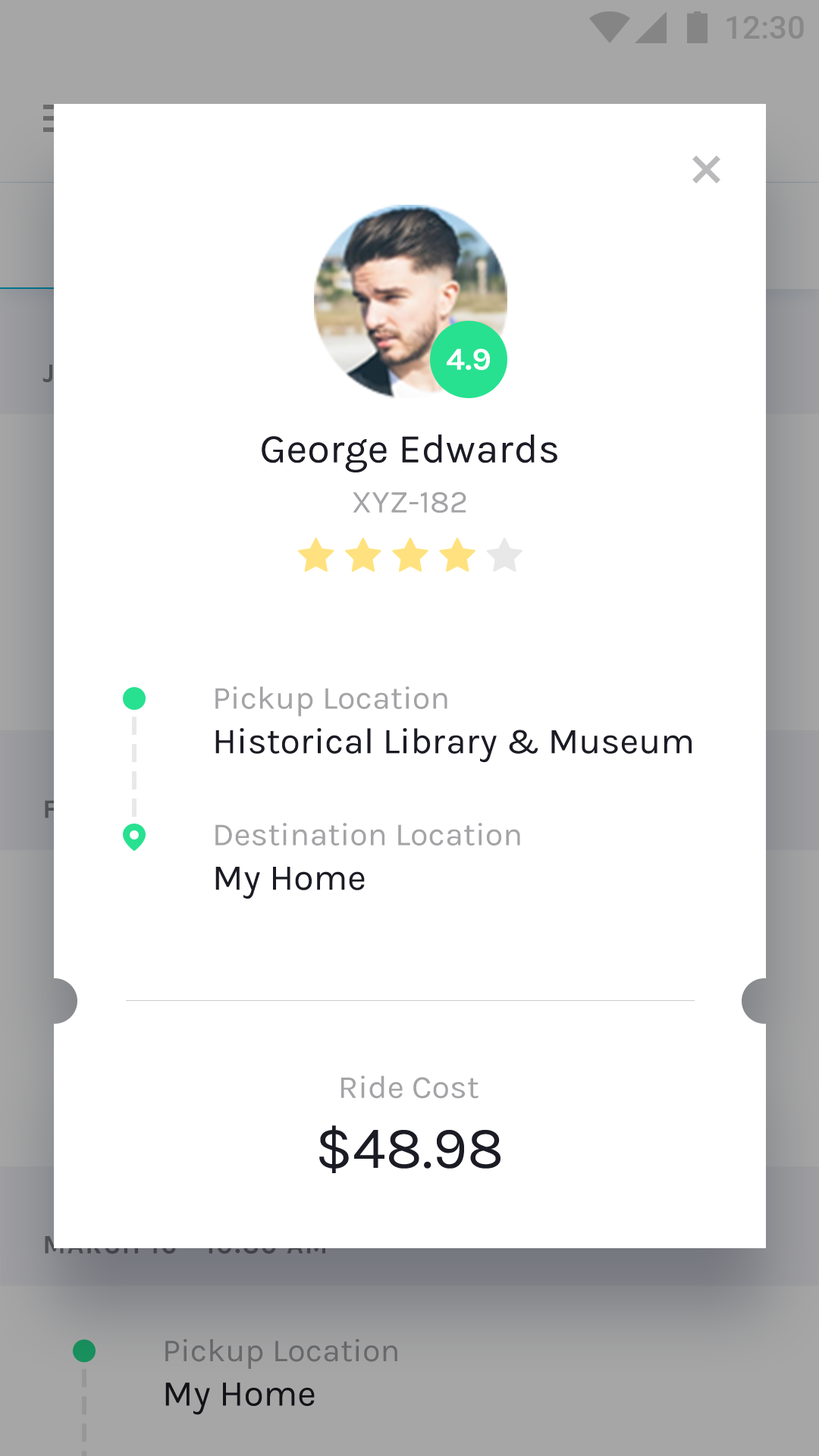
<style>
.page{position:relative;width:819px;height:1456px;background:#ffffff}
.page>*{position:absolute;margin:0}
.t1{font:31.7px "Karla-Bold";color:#ffffff}
.t2{font:40.9px "Karla-Regular";color:#1b1b24}
.t3{font:31.8px "Karla-Regular";color:#a4a4a7;text-transform:uppercase}
.t4{font:32.2px "Karla-Regular";color:#a4a4a7}
.t5{font:36.5px "Karla-Regular";color:#1b1b24}
.t6{font:59.4px "Karla-Regular";color:#1b1b24}
</style>
<div class="page">
<p class="t1" style="left:447px;top:348px;width:43px;height:22px">4.9</p>
<p class="t2" style="left:262px;top:435px;width:295px;height:37px">George Edwards</p>
<p class="t3" style="left:353px;top:491px;width:113px;height:22px">XYZ-182</p>
<p class="t4" style="left:215px;top:686px;width:232px;height:31px">Pickup Location</p>
<p class="t5" style="left:215px;top:728px;width:477px;height:34px">Historical Library &amp; Museum</p>
<p class="t4" style="left:215px;top:823px;width:305px;height:23px">Destination Location</p>
<p class="t5" style="left:215px;top:867px;width:150px;height:32px">My Home</p>
<p class="t4" style="left:341px;top:1075px;width:138px;height:24px">Ride Cost</p>
<p class="t6" style="left:319px;top:1125px;width:181px;height:48px">$48.98</p>
</div>
